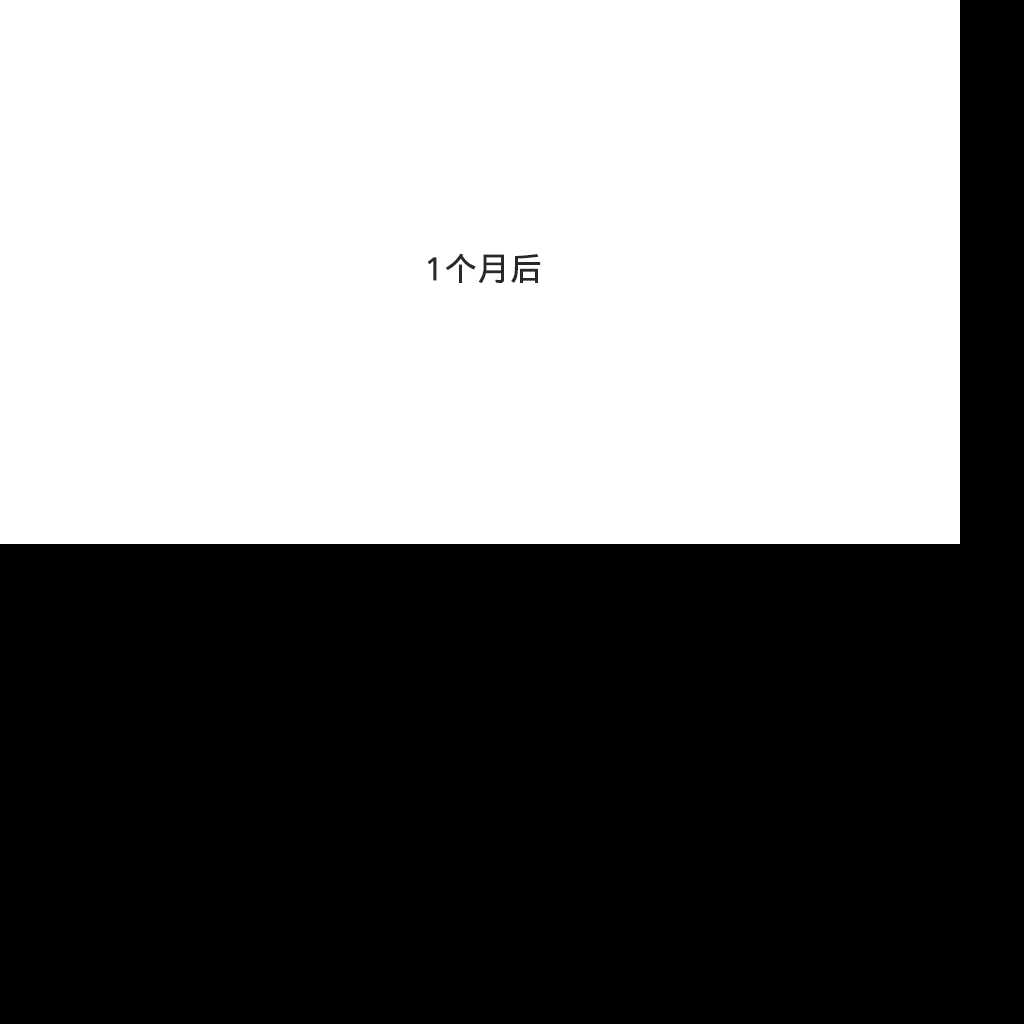
<style>
.page{position:relative;width:1024px;height:1024px;background:#000000}
.page>*{position:absolute;margin:0}
.t1{font:32px "WenQuanYiMicroHeiMono";color:#292829;font-weight:bold}
</style>
<div class="page">
<p class="t1" style="left:427px;top:253px;width:114px;height:31px">1个月后</p>
</div>
